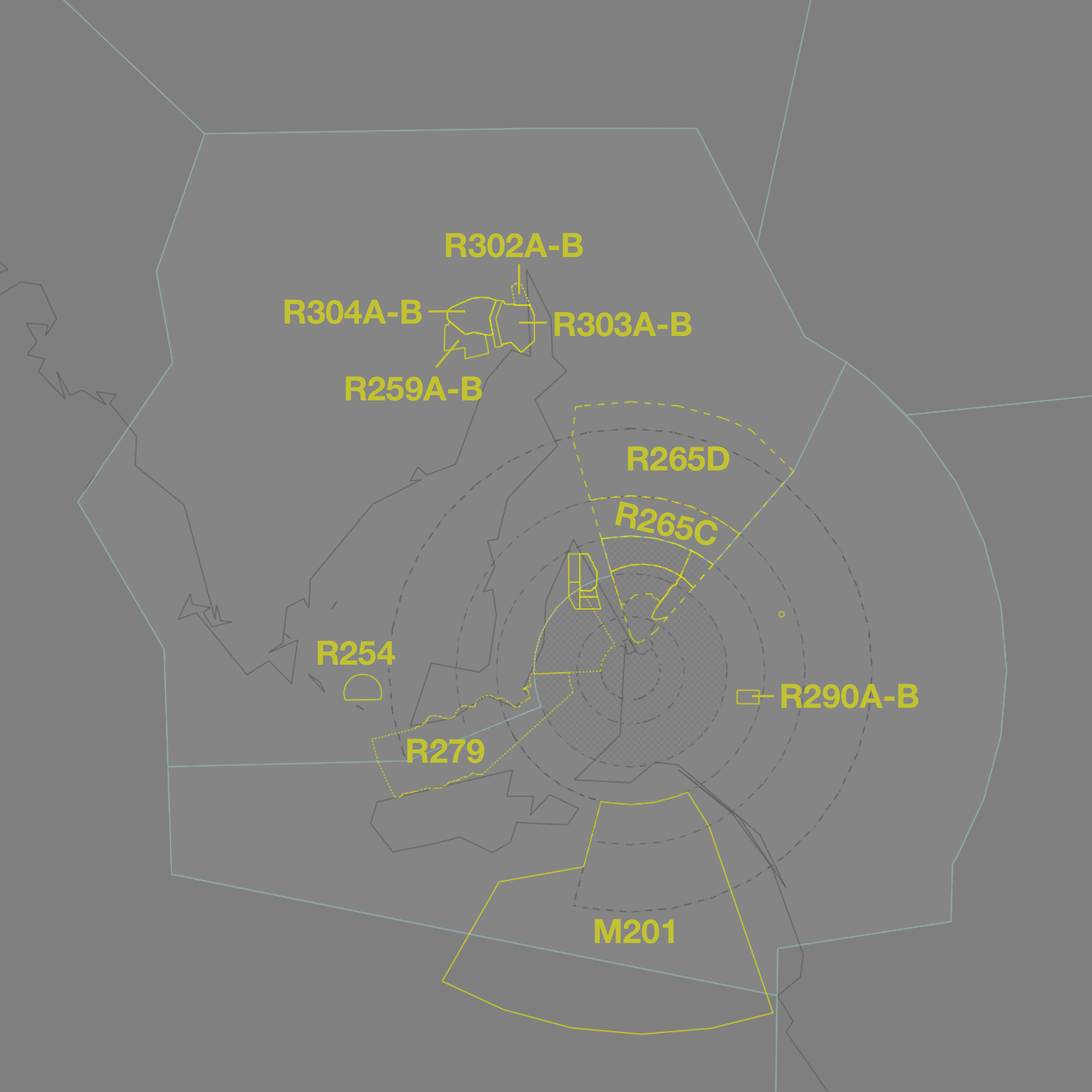
<style>
.page{position:relative;width:1092px;height:1092px;background:#7f7f7f}
.page>*{position:absolute;margin:0}
.t1{font:33.6px "HelveticaNeue-Bold";color:#c2c231}
</style>
<div class="page">
<p class="t1" style="left:446px;top:233px;width:137px;height:25px">R302A-B</p>
<p class="t1" style="left:284px;top:300px;width:138px;height:24px">R304A-B</p>
<p class="t1" style="left:554px;top:312px;width:138px;height:25px">R303A-B</p>
<p class="t1" style="left:346px;top:376px;width:136px;height:25px">R259A-B</p>
<p class="t1" style="left:628px;top:446px;width:102px;height:25px">R265D</p>
<p class="t1" style="left:615px;top:501px;width:103px;height:44px;rotate:12deg">R265C</p>
<p class="t1" style="left:318px;top:641px;width:77px;height:24px">R254</p>
<p class="t1" style="left:781px;top:684px;width:137px;height:24px">R290A-B</p>
<p class="t1" style="left:407px;top:739px;width:77px;height:24px">R279</p>
<p class="t1" style="left:595px;top:919px;width:79px;height:25px">M201</p>
</div>
